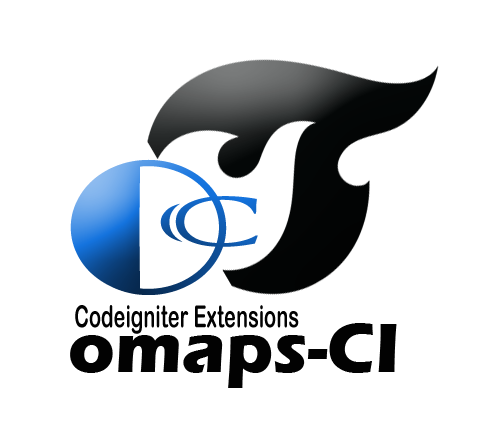
<style>
.page{position:relative;width:490px;height:434px;background:#ffffff}
.page>*{position:absolute;margin:0}
.t1{font:30.6px "ArialRoundedMTBold";color:#020202;scale:0.65 1}
.t2{font:72px "ErasITC-Bold";color:#020202}
</style>
<div class="page">
<p class="t1" style="left:75px;top:305px;width:224px;height:29px">Codeigniter Extensions</p>
<p class="t2" style="left:70px;top:323px;width:327px;height:65px">omaps-CI</p>
</div>
